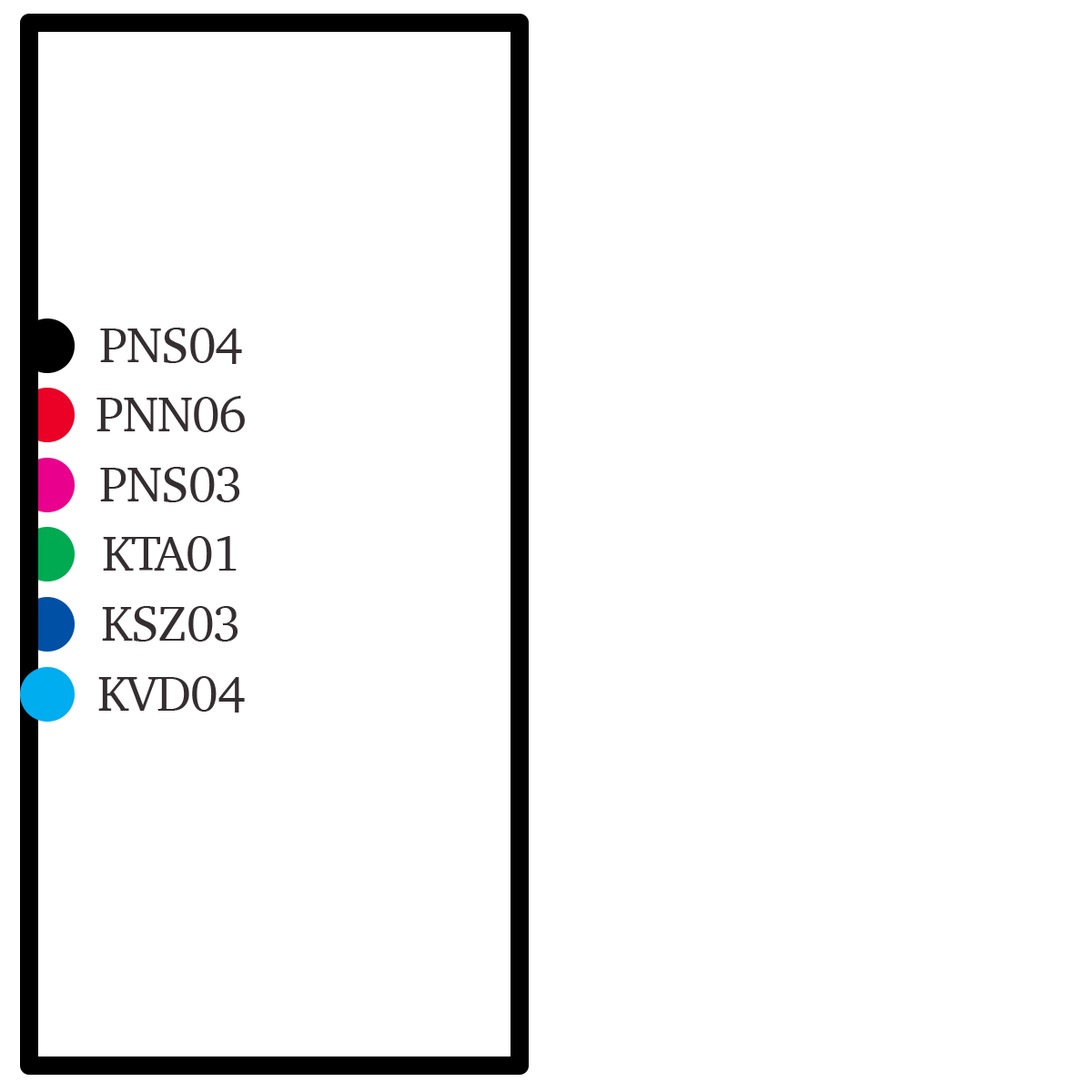
<style>
.page{position:relative;width:1092px;height:1092px;background:#ffffff}
.page>*{position:absolute;margin:0}
.t1{font:50.1px "Charter-Roman";letter-spacing:-0.02em;color:#352e31}
</style>
<div class="page">
<p class="t1" style="left:100px;top:328px;width:142px;height:36px">PNS04</p>
<p class="t1" style="left:96px;top:396px;width:149px;height:36px">PNN06</p>
<p class="t1" style="left:100px;top:467px;width:140px;height:35px">PNS03</p>
<p class="t1" style="left:103px;top:536px;width:134px;height:35px">KTA01</p>
<p class="t1" style="left:102px;top:606px;width:136px;height:36px">KSZ03</p>
<p class="t1" style="left:98px;top:676px;width:147px;height:37px">KVD04</p>
</div>
